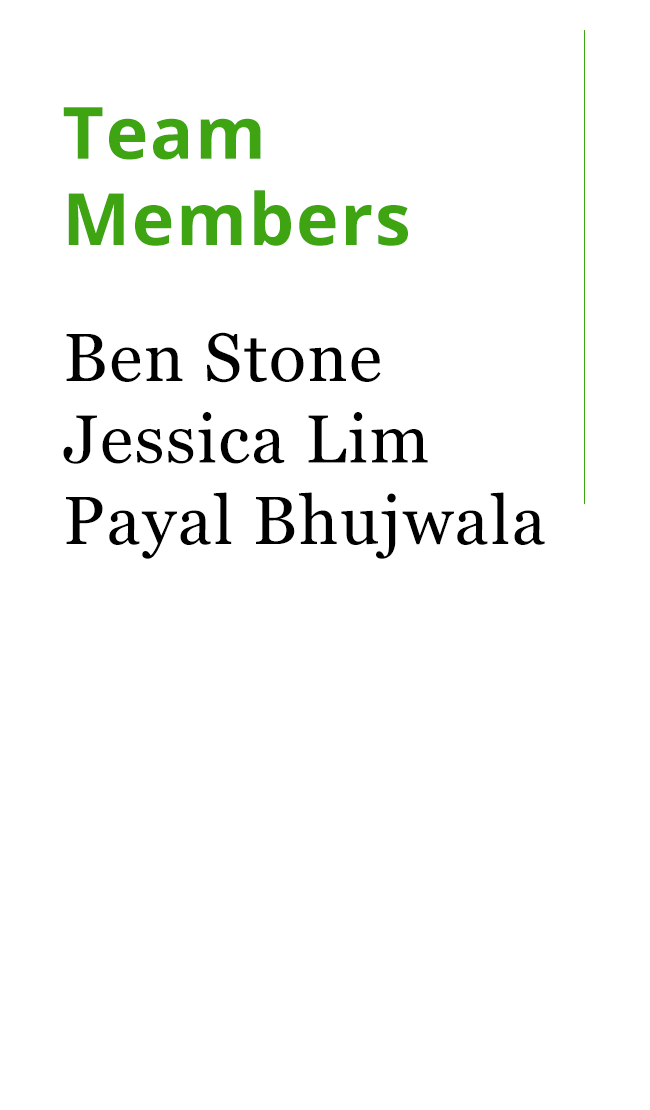
<style>
.page{position:relative;width:650px;height:1110px;background:#ffffff}
.page>*{position:absolute;margin:0}
.t1{font:72px "OpenSans-Bold";letter-spacing:0.025em;color:#3ea411}
.t2{font:68px "Georgia";letter-spacing:0.025em;color:#000000}
</style>
<div class="page">
<p class="t1" style="left:63px;top:107px;width:345px;height:139px">Team <br>Members</p>
<p class="t2" style="left:63px;top:332px;width:482px;height:227px">Ben Stone<br>Jessica Lim<br>Payal Bhujwala</p>
</div>
